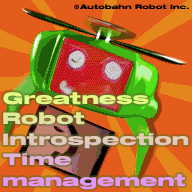
<style>
.page{position:relative;width:192px;height:192px;background:#e45c1b}
.page>*{position:absolute;margin:0}
.t1{font:6.5px "MATROSKA";color:#000000}
.t2{font:17px "MATROSKA"}
</style>
<div class="page">
<p class="t1" style="left:74px;top:4px;width:115px;height:6px">©Autobahn Robot Inc.</p>
<p class="t2" style="left:3px;top:92px;width:186px;height:98px">Greatness<br>Robot<br>Introspection<br>Time<br>management</p>
</div>
